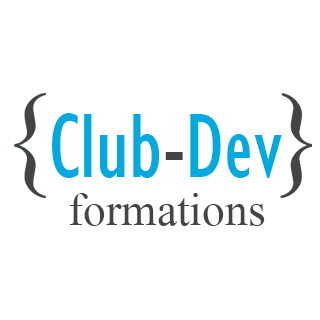
<style>
.page{position:relative;width:320px;height:320px;background:#ffffff}
.page>*{position:absolute;margin:0}
.t1{font:94px "GillSansMT-Condensed";color:#00a9e0}
.t2{font:94px "GillSansMT-Condensed";color:#444444}
.t3{font:69px "AngsanaNew";color:#444444}
</style>
<div class="page">
<p class="t1" style="left:52px;top:113px;width:230px;height:65px">Club<span class="t2">-</span>Dev</p>
<p class="t3" style="left:69px;top:193px;width:196px;height:33px">formations</p>
</div>
